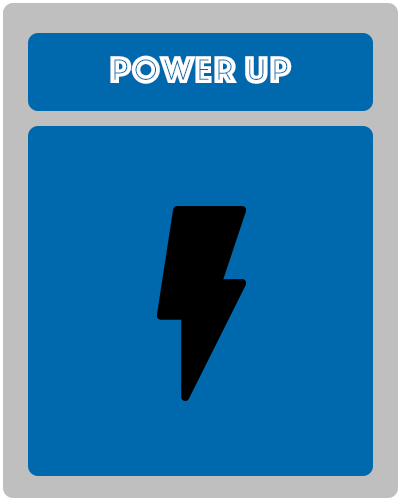
<style>
.page{position:relative;width:400px;height:500px;background:#0069ae}
.page>*{position:absolute;margin:0}
.t1{font:40px "Phosphate-Inline";color:#fefefe}
</style>
<div class="page">
<p class="t1" style="left:110px;top:55px;width:182px;height:29px">POWER UP</p>
</div>
